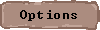
<style>
.page{position:relative;width:100px;height:30px;background:#ab8c7f}
.page>*{position:absolute;margin:0}
.t1{font:13px "Terminal";letter-spacing:0.04em;color:#000000}
</style>
<div class="page">
<p class="t1" style="left:20px;top:10px;width:57px;height:11px">Options</p>
</div>
